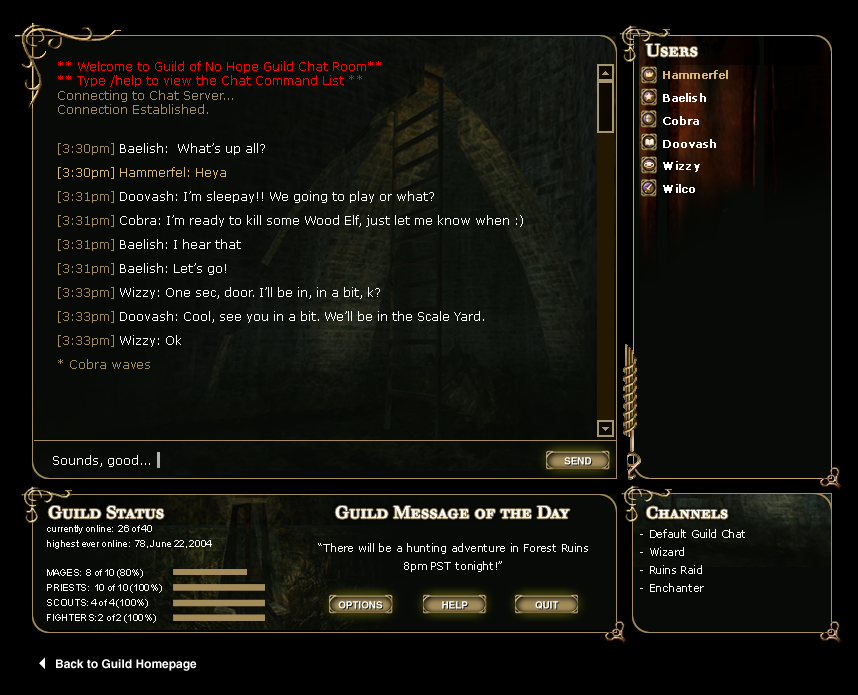
<style>
.page{position:relative;width:858px;height:695px;background:#070a06}
.page>*{position:absolute;margin:0}
.t1{font:16.2px "Walbaum-RomanSC";letter-spacing:-0.02em;color:#fffdfa;font-weight:bold;scale:1.11 1}
.t2{font:12px "Verdana";color:#ff0000}
.t3{font:12px "Verdana";color:#a38c5a}
.t4{font:12px/24px "Verdana";color:#a38c5a}
.t5{font:12px/24px "Verdana";color:#ffffff}
.t6{font:12px/24px "Verdana";color:#d8b86f}
.t7{font:11.5px/23px "Verdana";letter-spacing:-0.02em;color:#ffffff;font-weight:bold}
.t8{font:11.5px/23px "Verdana";letter-spacing:-0.02em;color:#d8b86f;font-weight:bold}
.t9{font:12px "Verdana";color:#ffffff}
.t10{font:9.8px "Helvetica-Bold";color:#ffffff}
.t11{font:15.3px "Walbaum-RomanSC";letter-spacing:-0.02em;color:#fffdfa;font-weight:bold;scale:1.11 1}
.t12{font:9.8px/14.8px "ArialMT";letter-spacing:-0.02em;color:#ffffff}
.t13{font:11px/18px "Verdana";color:#fefdfd}
.t14{font:9.9px/18px "Verdana";letter-spacing:-0.02em;color:#a38c5a;font-weight:bold;scale:1.11 1}
.t15{font:12px "Helvetica-Bold";color:#ffffff}
</style>
<div class="page">
<p class="t1" style="left:646px;top:44px;width:52px;height:13px">Users</p>
<p class="t2" style="left:58px;top:61px;width:465px;height:308px">** Welcome to Guild of No Hope Guild Chat Room**<br>** Type /help to view the Chat Command List **<br><span class="t3">Connecting to Chat Server...<br>Connection Established.<br><br></span><span class="t4">[3:30pm] </span><span class="t5">Baelish:  What’s up all?<br></span><span class="t6">[3:30pm] Hammerfel: Heya<br></span><span class="t4">[3:31pm] </span><span class="t5">Doovash: I’m sleepay!! We going to play or what?<br></span><span class="t4">[3:31pm] </span><span class="t5">Cobra: I’m ready to kill some Wood Elf, just let me know when :)<br></span><span class="t4">[3:31pm] </span><span class="t5">Baelish: I hear that<br></span><span class="t4">[3:31pm] </span><span class="t5">Baelish: Let’s go!<br></span><span class="t4">[3:33pm] </span><span class="t5">Wizzy: One sec, door. I’ll be in, in a bit, k?<br></span><span class="t4">[3:33pm] </span><span class="t5">Doovash: Cool, see you in a bit. We’ll be in the Scale Yard.<br></span><span class="t4">[3:33pm] </span><span class="t5">Wizzy: Ok<br></span><span class="t4">* Cobra waves</span></p>
<p class="t7" style="left:663px;top:70px;width:65px;height:123px"><span class="t8">Hammerfel<br></span>Baelish<br>Cobra<br>Doovash<br>Wizzy<br>Wilco</p>
<p class="t9" style="left:53px;top:455px;width:97px;height:12px">Sounds, good...</p>
<p class="t10" style="left:564px;top:457px;width:28px;height:8px">SEND</p>
<p class="t1" style="left:48px;top:506px;width:116px;height:13px">Guild Status</p>
<p class="t1" style="left:335px;top:506px;width:235px;height:13px">Guild Message of the Day</p>
<p class="t11" style="left:646px;top:506px;width:82px;height:13px">Channels</p>
<p class="t12" style="left:47px;top:525px;width:165px;height:98px">currently online:  26 of 40<br>highest ever online:  78, June 22, 2004<br><br>MAGES:  8 of 10 (80%)<br>PRIESTS:  10 of 10 (100%)<br>SCOUTS: 4 of 4 (100%)<br>FIGHTERS: 2 of 2 (100%)</p>
<p class="t13" style="left:640px;top:529px;width:105px;height:63px"><span class="t14"><br></span>- Default Guild Chat<br>- Wizard<br>- Ruins Raid<br>- Enchanter</p>
<p class="t13" style="left:318px;top:543px;width:270px;height:29px"><span class="t14"><br></span><br>“There will be a hunting adventure in Forest Ruins 8pm PST tonight!”</p>
<p class="t10" style="left:338px;top:601px;width:45px;height:8px">OPTIONS</p>
<p class="t10" style="left:442px;top:601px;width:26px;height:8px">HELP</p>
<p class="t10" style="left:535px;top:601px;width:24px;height:8px">QUIT</p>
<p class="t15" style="left:56px;top:659px;width:141px;height:12px">Back to Guild Homepage</p>
</div>
